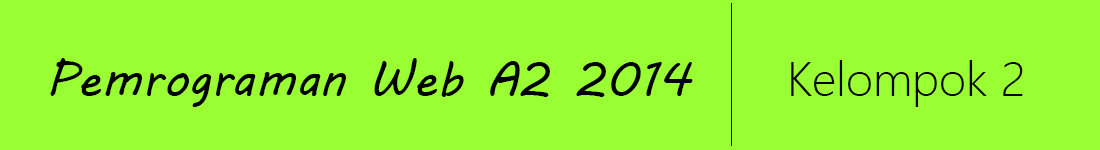
<style>
.page{position:relative;width:1100px;height:150px;background:#99ff33}
.page>*{position:absolute;margin:0}
.t1{font:48px "MVBoli";color:#000000}
.t2{font:48px "SegoeUI-Light";color:#000000}
</style>
<div class="page">
<p class="t1" style="left:50px;top:58px;width:643px;height:49px">Pemrograman Web A2 2014</p>
<p class="t2" style="left:791px;top:60px;width:232px;height:47px">Kelompok 2</p>
</div>
